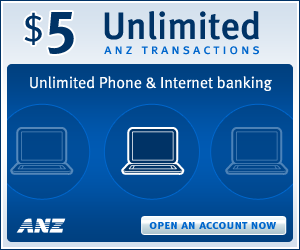
<style>
.page{position:relative;width:300px;height:250px}
.page>*{position:absolute;margin:0}
.t1{font:36px "MetaNormalLF-Roman";color:#003366}
.t2{font:60px "MetaBoldLF-Roman";color:#003366}
.t3{font:38px "MetaMediumLF-Roman";color:#003366}
.t4{font:14px "MetaNormalLF-Caps";letter-spacing:0.21em;color:#0066cc}
.t5{font:16px "MetaNormalLF-Roman";color:#ffffff}
.t6{font:13px "MetaBold-Caps";letter-spacing:0.01em;color:#0066cc}
</style>
<div class="page">
<p class="t1" style="left:24px;top:12px;width:18px;height:33px">$</p>
<p class="t2" style="left:48px;top:12px;width:26px;height:42px">5</p>
<p class="t3" style="left:104px;top:11px;width:155px;height:29px">Unlimited</p>
<p class="t4" style="left:104px;top:46px;width:155px;height:9px">anz transactions</p>
<p class="t5" style="left:30px;top:76px;width:242px;height:15px">Unlimited Phone &amp; Internet banking</p>
<p class="t6" style="left:149px;top:222px;width:127px;height:7px">open an account now</p>
</div>
